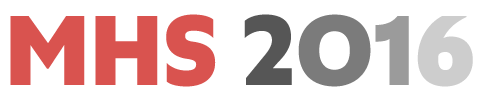
<style>
.page{position:relative;width:480px;height:100px;background:#ffffff}
.page>*{position:absolute;margin:0}
.t1{font:100px "Altis-ExtraBold";color:#d9534f}
.t2{font:100px "Altis-ExtraBold";color:#565656}
.t3{font:100px "Altis-ExtraBold";color:#7b7b7b}
.t4{font:100px "Altis-ExtraBold";color:#9b9b9b}
.t5{font:100px "Altis-ExtraBold";color:#cdcdcd}
</style>
<div class="page">
<p class="t1" style="left:10px;top:14px;width:463px;height:73px">MHS <span class="t2">2</span><span class="t3">0</span><span class="t4">1</span><span class="t5">6</span></p>
</div>
